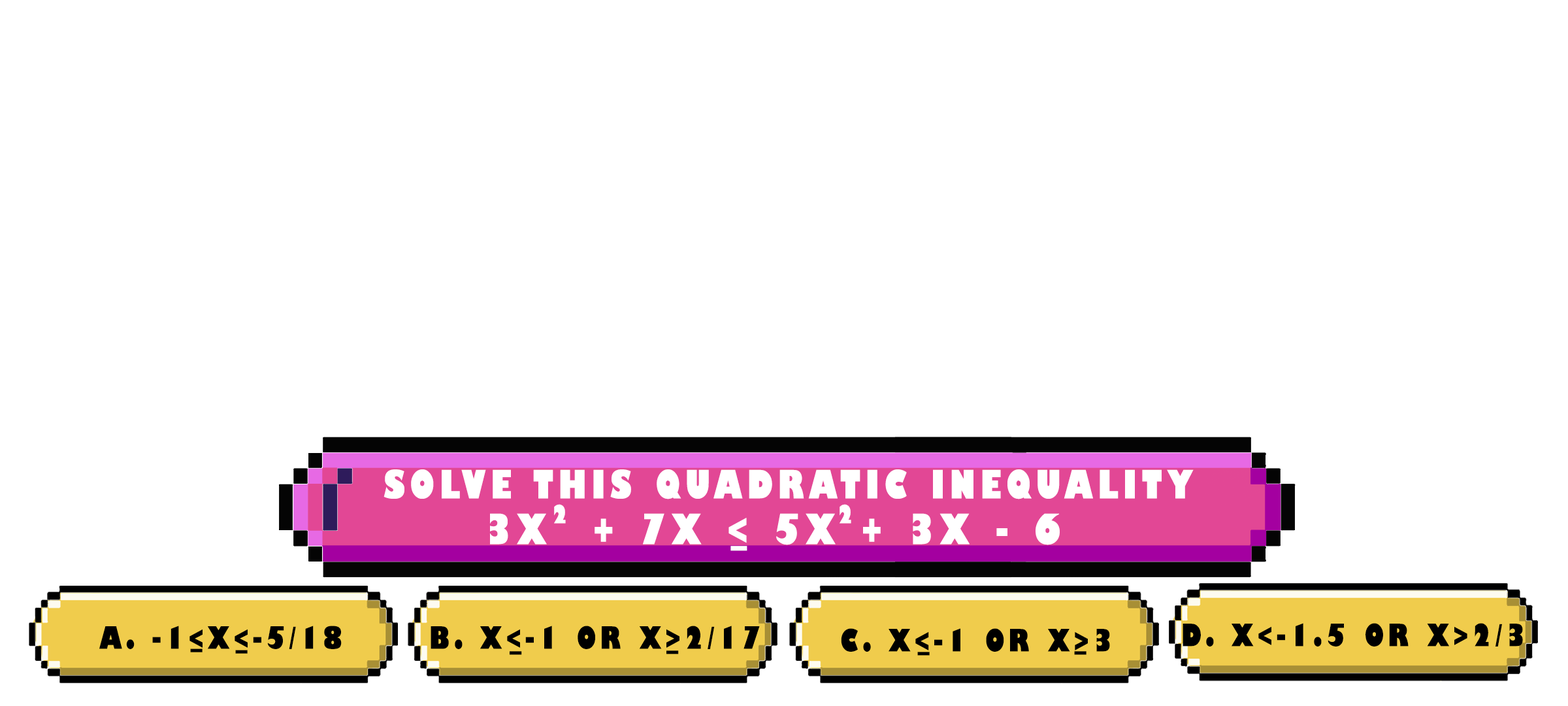
<style>
.page{position:relative;width:1568px;height:706px;background:#ffffff}
.page>*{position:absolute;margin:0}
.t1{font:38.1px "GillSans-UltraBoldCondensed";letter-spacing:0.115em;color:#ffffff;text-transform:uppercase;scale:1.12 1}
.t2{font:24.5px "GillSans-UltraBoldCondensed";letter-spacing:0.115em;color:#ffffff;text-transform:uppercase;scale:1.12 1}
.t3{font:40.8px "GillSans-UltraBoldCondensed";letter-spacing:0.115em;color:#ffffff;text-transform:uppercase;scale:1.12 1}
.t4{font:29.9px "GillSans-UltraBoldCondensed";letter-spacing:0.115em;color:#000000;text-transform:uppercase;scale:1.12 1}
</style>
<div class="page">
<p class="t1" style="left:384px;top:469px;width:810px;height:30px">solve this quadratic inequality</p>
<p class="t2" style="left:554px;top:504px;width:12px;height:19px">2</p>
<p class="t2" style="left:840px;top:504px;width:11px;height:19px">2</p>
<p class="t3" style="left:490px;top:513px;width:570px;height:32px">3x  + 7x &lt; 5x + 3x - 6</p>
<p class="t3" style="left:730px;top:546px;width:17px;height:5px">_</p>
<p class="t4" style="left:99px;top:625px;width:243px;height:24px">a. -1&lt;x&lt;-5/18</p>
<p class="t4" style="left:431px;top:625px;width:329px;height:24px">b. x&lt;-1 or x&gt;2/17</p>
<p class="t4" style="left:841px;top:628px;width:269px;height:23px">c. x&lt;-1 or x&gt;3</p>
<p class="t4" style="left:1183px;top:623px;width:340px;height:23px">d. x&lt;-1.5 or x&gt;2/3</p>
<p class="t4" style="left:190px;top:648px;width:13px;height:4px">_</p>
<p class="t4" style="left:235px;top:649px;width:13px;height:4px">_</p>
<p class="t4" style="left:510px;top:651px;width:12px;height:4px">_</p>
<p class="t4" style="left:666px;top:650px;width:13px;height:4px">_</p>
<p class="t4" style="left:917px;top:651px;width:13px;height:4px">_</p>
<p class="t4" style="left:1074px;top:651px;width:12px;height:4px">_</p>
</div>
